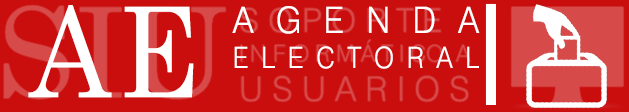
<style>
.page{position:relative;width:629px;height:112px;background:#ca0e0e}
.page>*{position:absolute;margin:0}
.t1{font:125px "CenturySchoolbook";letter-spacing:0.06em;color:#ffffff;scale:0.9 1}
.t2{font:29.2px "Swiss721BT-Light";letter-spacing:0.08em;color:#ffffff;scale:0.9 1}
.t3{font:36.4px/29.2px "Swiss721BT-Light";letter-spacing:0.16em;color:#ffffff;scale:0.93 1}
</style>
<div class="page">
<p class="t1" style="left:28px;top:5px;width:166px;height:93px">AE</p>
<p class="t2" style="left:232px;top:6px;width:248px;height:63px;text-align:justify"><span class="t3">AGENDA </span>ELECTORAL</p>
</div>
